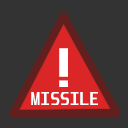
<style>
.page{position:relative;width:128px;height:128px;background:#333333}
.page>*{position:absolute;margin:0}
.t1{font:48px "Unispace-Bold";color:#ffffff}
.t2{font:16px "Unispace-Bold";color:#ffffff}
</style>
<div class="page">
<p class="t1" style="left:59px;top:48px;width:9px;height:39px">!</p>
<p class="t2" style="left:31px;top:92px;width:67px;height:13px">MISSILE</p>
</div>
